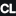
<style>
.page{position:relative;width:16px;height:16px;background:#111519}
.page>*{position:absolute;margin:0}
.t1{font:12.5px "Inter-Bold";color:#ffffff}
</style>
<div class="page">
<p class="t1" style="left:0px;top:3px;width:9px;height:11px">C</p>
<p class="t1" style="left:9px;top:3px;width:7px;height:11px">L</p>
</div>
